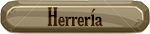
<style>
.page{position:relative;width:150px;height:34px}
.page>*{position:absolute;margin:0}
.t1{font:25px "TheSoulOfVodka"}
</style>
<div class="page">
<p class="t1" style="left:47px;top:7px;width:56px;height:20px">Herrería</p>
</div>
